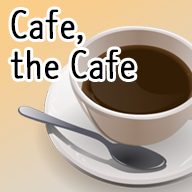
<style>
.page{position:relative;width:192px;height:192px}
.page>*{position:absolute;margin:0}
.t1{font:36px/40px "NanumBarunpen";color:#000000;font-weight:bold}
</style>
<div class="page">
<p class="t1" style="left:10px;top:9px;width:125px;height:70px">Cafe,<br>the Cafe</p>
</div>
